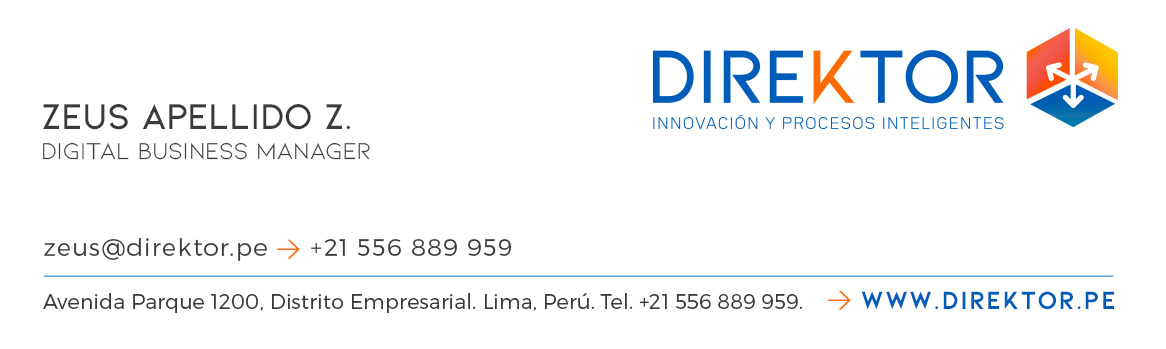
<style>
.page{position:relative;width:1166px;height:349px;background:#ffffff}
.page>*{position:absolute;margin:0}
.t1{font:37.9px "Kiona-SemiBold";letter-spacing:-0.025em;color:#3a3a3a}
.t2{font:24.2px "Kiona-Regular";letter-spacing:-0.01em;color:#3a3a3a}
.t3{font:24.3px "Montserrat-Light";letter-spacing:0.05em;color:#3a3a3a}
.t4{font:24.3px "DIN-Regular";letter-spacing:0.05em;color:#ff6b00}
.t5{font:20.6px "Montserrat-Light";letter-spacing:0.01em;color:#3a3a3a}
.t6{font:26.1px "Kiona-Bold";letter-spacing:0.049em;color:#005cb9}
</style>
<div class="page">
<p class="t1" style="left:43px;top:104px;width:307px;height:26px">Zeus apellido z.</p>
<p class="t2" style="left:43px;top:142px;width:327px;height:18px">Digital Business Manager</p>
<p class="t3" style="left:44px;top:238px;width:468px;height:23px">zeus@direktor.pe <span class="t4">&gt;</span> +21 556 889 959</p>
<p class="t5" style="left:43px;top:293px;width:759px;height:20px">Avenida Parque 1200, Distrito Empresarial. Lima, Perú. Tel. +21 556 889 959.</p>
<p class="t6" style="left:828px;top:290px;width:286px;height:20px"><span class="t4">&gt; </span>www.direktor.pe</p>
</div>
